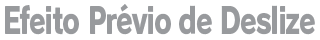
<style>
.page{position:relative;width:320px;height:40px;background:#ffffff}
.page>*{position:absolute;margin:0}
.t1{font:36px "RodinPro-EB";letter-spacing:-0.04em;color:#989a9d;scale:0.75 1}
</style>
<div class="page">
<p class="t1" style="left:5px;top:4px;width:310px;height:31px">Efeito Prévio de Deslize</p>
</div>
